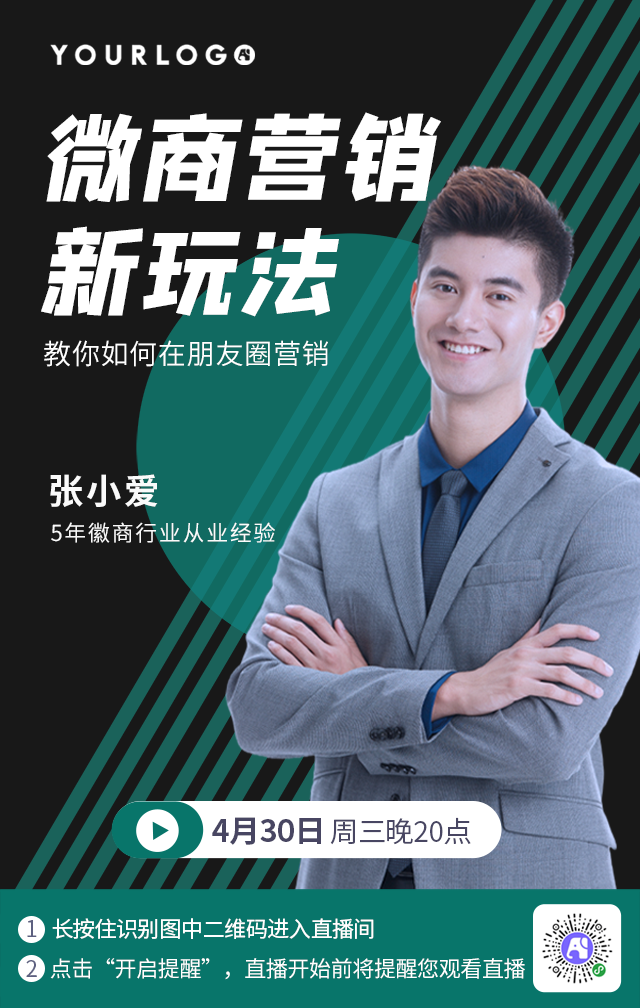
<style>
.page{position:relative;width:640px;height:1008px;background:#181818}
.page>*{position:absolute;margin:0}
.t1{font:97.4px/114.6px "zihun100hao-fangfangxianfengti";letter-spacing:0.025em;color:#ffffff;text-transform:uppercase;font-style:italic}
.t2{font:28px "SourceHanSansSC-Normal";letter-spacing:0.025em;color:#ffffff;text-transform:uppercase}
.t3{font:35.3px "SourceHanSansSC-Bold";letter-spacing:0.075em;color:#ffffff}
.t4{font:22px "SourceHanSansSC-Regular";letter-spacing:0.075em;color:#ffffff}
.t5{font:28.3px "SourceHanSansSC-Normal";letter-spacing:-0.02em;color:#484662}
.t6{font:30.8px "SourceHanSansSC-Bold";letter-spacing:-0.02em;color:#484662}
.t7{font:22px "SourceHanSansSC-Regular";letter-spacing:-0.02em;color:#ffffff}
.t8{font:22px "SourceHanSansSC-Regular";letter-spacing:-0.02em;color:#5d6080}
</style>
<div class="page">
<p class="t1" style="left:41px;top:112px;width:400px;height:205px">微商营销<br>新玩法</p>
<p class="t2" style="left:44px;top:340px;width:284px;height:27px">教你如何在朋友圈营销</p>
<p class="t3" style="left:50px;top:474px;width:108px;height:33px;opacity:0.97">张小爱</p>
<p class="t4" style="left:51px;top:522px;width:224px;height:21px;opacity:0.97">5年徽商行业从业经验</p>
<p class="t5" style="left:212px;top:817px;width:259px;height:28px"><span class="t6">4月30日 </span>周三晚20点</p>
<p class="t7" style="left:52px;top:918px;width:322px;height:21px">长按住识别图中二维码进入直播间</p>
<p class="t8" style="left:27px;top:920px;width:10px;height:17px">1</p>
<p class="t8" style="left:26px;top:960px;width:11px;height:17px">2</p>
<p class="t7" style="left:50px;top:958px;width:475px;height:22px">点击“开启提醒”，直播开始前将提醒您观看直播</p>
</div>
